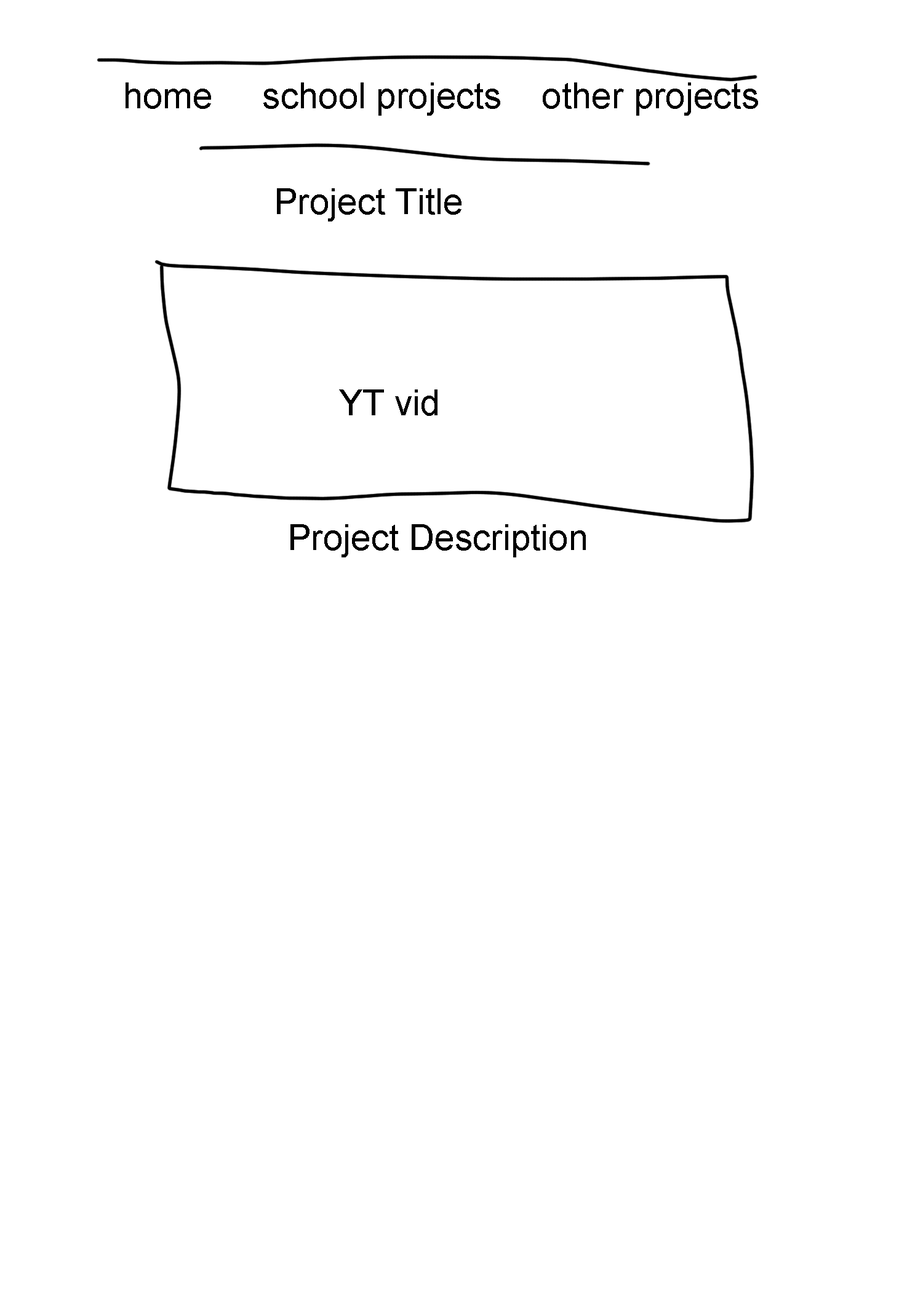
<style>
.page{position:relative;width:923px;height:1292px;background:#ffffff}
.page>*{position:absolute;margin:0}
.t1{font:35.9px "ArialMT";color:#000000}
</style>
<div class="page">
<p class="t1" style="left:126px;top:82px;width:632px;height:34px">home     school projects    other projects</p>
<p class="t1" style="left:277px;top:188px;width:184px;height:33px">Project Title</p>
<p class="t1" style="left:339px;top:389px;width:98px;height:27px">YT vid</p>
<p class="t1" style="left:290px;top:524px;width:296px;height:33px">Project Description</p>
</div>
